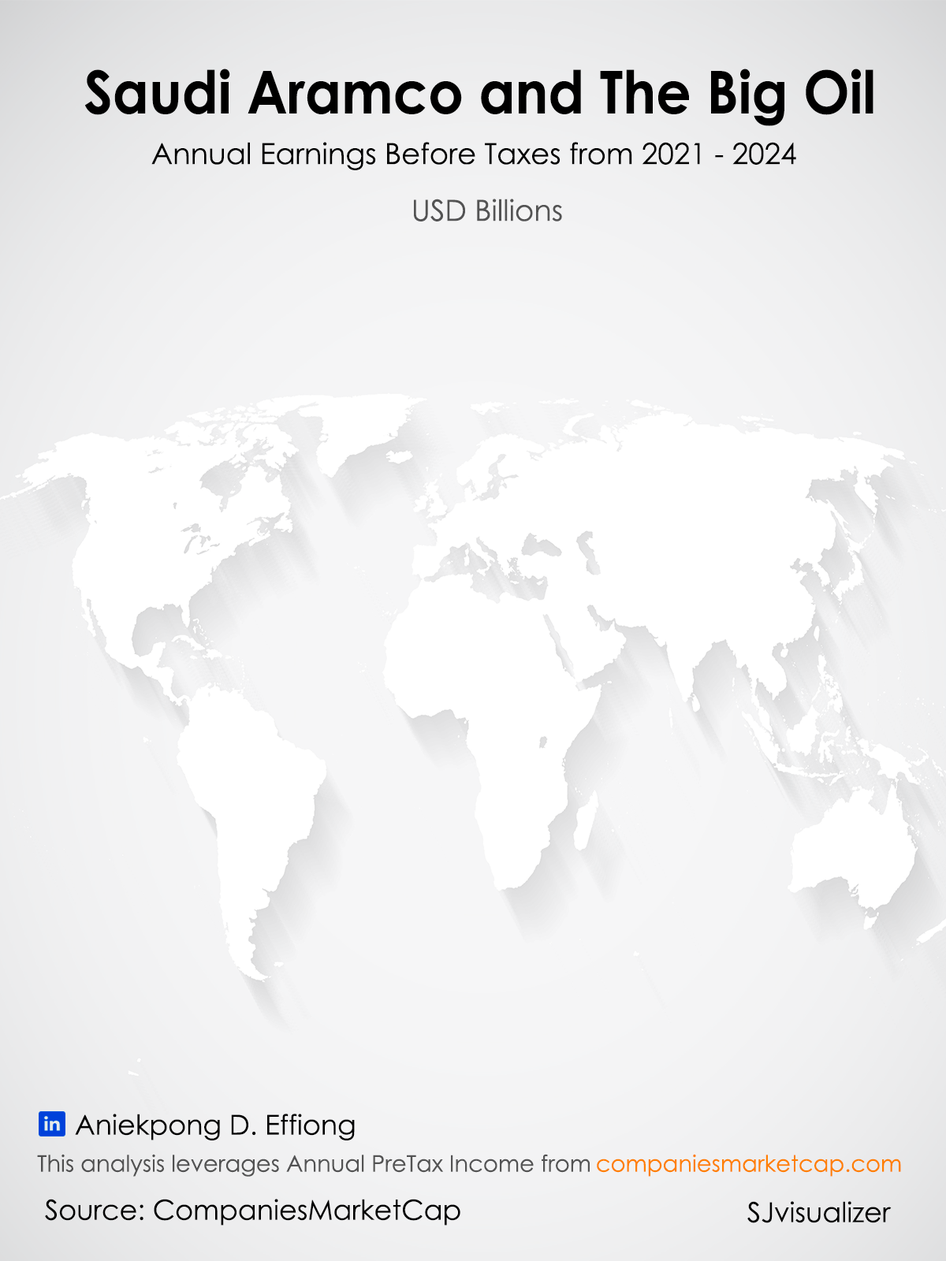
<style>
.page{position:relative;width:946px;height:1261px}
.page>*{position:absolute;margin:0}
.t1{font:59.1px "CenturyGothic-Bold";color:#000000;scale:0.93 1}
.t2{font:29.2px "CenturyGothic";color:#000000}
.t3{font:29.2px "CenturyGothic";color:#535353}
.t4{font:27.6px "CenturyGothic";color:#000000}
.t5{font:22.9px "CenturyGothic";color:#525253}
.t6{font:22.9px "CenturyGothic";color:#ff7f00}
</style>
<div class="page">
<p class="t1" style="left:84px;top:69px;width:789px;height:57px">Saudi Aramco and The Big Oil</p>
<p class="t2" style="left:151px;top:142px;width:645px;height:28px">Annual Earnings Before Taxes from 2021 - 2024</p>
<p class="t3" style="left:414px;top:199px;width:148px;height:22px">USD Billions</p>
<p class="t4" style="left:75px;top:1114px;width:280px;height:26px">Aniekpong D. Effiong</p>
<p class="t5" style="left:37px;top:1154px;width:552px;height:23px">This analysis leverages Annual PreTax Income from</p>
<p class="t6" style="left:597px;top:1154px;width:304px;height:23px">companiesmarketcap.com</p>
<p class="t4" style="left:45px;top:1199px;width:415px;height:26px">Source: CompaniesMarketCap</p>
<p class="t4" style="left:747px;top:1201px;width:144px;height:22px">SJvisualizer</p>
</div>
